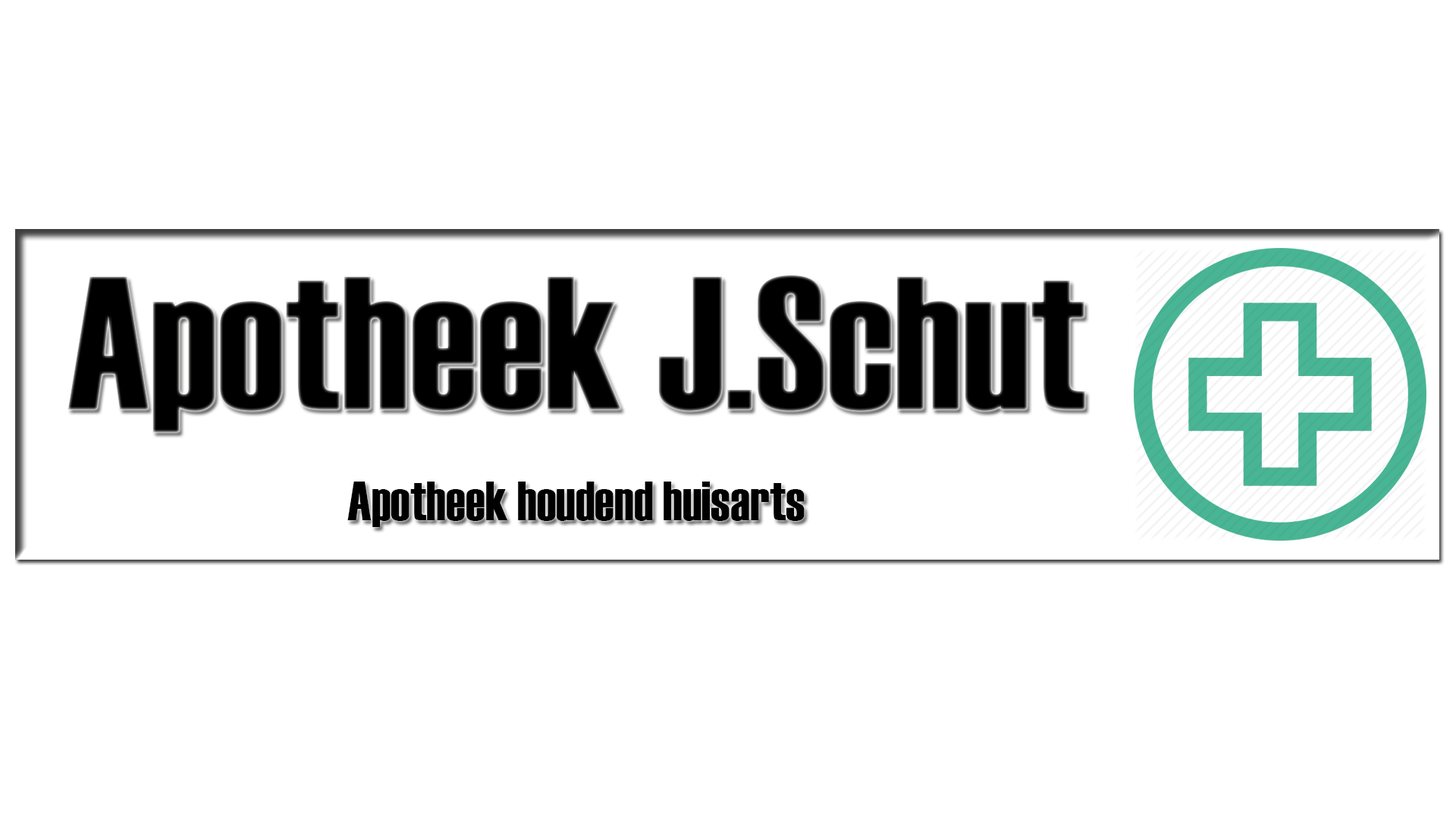
<style>
.page{position:relative;width:1456px;height:819px;background:#ffffff}
.page>*{position:absolute;margin:0}
.t1{font:189.6px "Haettenschweiler";color:#000000}
.t2{font:54.6px "Haettenschweiler";color:#000000}
</style>
<div class="page">
<p class="t1" style="left:67px;top:275px;width:1018px;height:157px">Apotheek J.Schut</p>
<p class="t2" style="left:347px;top:482px;width:458px;height:45px">Apotheek houdend huisarts</p>
</div>
